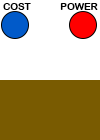
<style>
.page{position:relative;width:100px;height:140px;background:#ffffff}
.page>*{position:absolute;margin:0}
.t1{font:9.7px "ArialRoundedMTBold";letter-spacing:0.01em;color:#000000}
</style>
<div class="page">
<p class="t1" style="left:3px;top:3px;width:28px;height:7px">COST</p>
<p class="t1" style="left:60px;top:3px;width:38px;height:7px">POWER</p>
</div>
